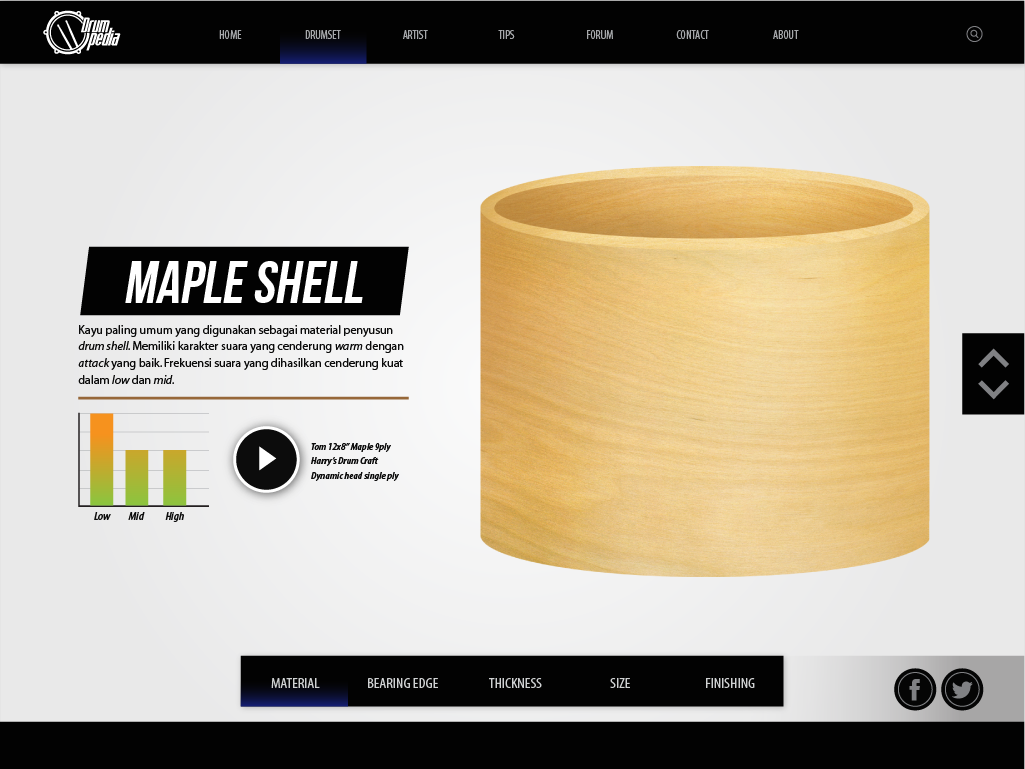
<style>
.page{position:relative;width:1025px;height:769px}
.page>*{position:absolute;margin:0}
.t1{font:12px "Myriad-Condensed";color:#a6a8ab}
.t2{font:60px "BebasNeue";color:#ffffff}
.t3{font:12px/16.6px "Myriad-Roman";color:#0c0c0c}
.t4{font:12px/16.6px "Myriad-Italic";color:#0c0c0c}
.t5{font:10px "Myriad-CnSemiboldItalic";color:#0c0c0c;scale:1.14 1}
.t6{font:11.1px "Myriad-CnSemiboldItalic";color:#0c0c0c;scale:1.14 1}
.t7{font:14px "Myriad-Condensed";color:#d0d2d3;scale:1.14 1}
</style>
<div class="page">
<p class="t1" style="left:219px;top:30px;width:23px;height:9px">HOME</p>
<p class="t1" style="left:305px;top:30px;width:36px;height:9px">DRUMSET</p>
<p class="t1" style="left:403px;top:30px;width:25px;height:9px">ARTIST</p>
<p class="t1" style="left:498px;top:30px;width:17px;height:9px">TIPS</p>
<p class="t1" style="left:587px;top:30px;width:26px;height:9px">FORUM</p>
<p class="t1" style="left:676px;top:30px;width:33px;height:9px">CONTACT</p>
<p class="t1" style="left:773px;top:30px;width:26px;height:9px">ABOUT</p>
<p class="t2" style="left:125px;top:261px;width:238px;height:42px">MAPLE SHELL</p>
<p class="t3" style="left:78px;top:325px;width:326px;height:59px">Kayu paling umum yang digunakan sebagai material penyusun <span class="t4">drum shell. </span>Memiliki karakter suara yang cenderung <span class="t4">warm</span> dengan <span class="t4">attack</span> yang baik. Frekuensi suara yang dihasilkan cenderung kuat dalam <span class="t4">low</span> dan <span class="t4">mid.</span></p>
<p class="t5" style="left:311px;top:443px;width:80px;height:9px">Tom 12x8” Maple 9ply</p>
<p class="t5" style="left:311px;top:457px;width:68px;height:9px">Harry’s Drum Craft</p>
<p class="t5" style="left:311px;top:472px;width:88px;height:9px">Dynamic head single ply</p>
<p class="t6" style="left:94px;top:512px;width:17px;height:8px">Low</p>
<p class="t6" style="left:128px;top:512px;width:17px;height:8px">Mid</p>
<p class="t6" style="left:165px;top:512px;width:19px;height:10px">High</p>
<p class="t7" style="left:271px;top:678px;width:49px;height:10px">MATERIAL</p>
<p class="t7" style="left:368px;top:678px;width:70px;height:10px">BEARING EDGE</p>
<p class="t7" style="left:489px;top:678px;width:53px;height:10px">THICKNESS</p>
<p class="t7" style="left:610px;top:678px;width:20px;height:10px">SIZE</p>
<p class="t7" style="left:706px;top:678px;width:49px;height:10px">FINISHING</p>
</div>
